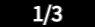
<style>
.page{position:relative;width:95px;height:27px;background:#000000}
.page>*{position:absolute;margin:0}
.t1{font:20px "WebPSD-18463539-0-Regular";color:#ffffff;font-weight:bold}
</style>
<div class="page">
<p class="t1" style="left:0px;top:0px;width:95px;height:27px">1/3</p>
</div>
